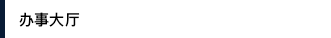
<style>
.page{position:relative;width:331px;height:38px;background:#ffffff}
.page>*{position:absolute;margin:0}
.t1{font:15px "PingFangSC-Medium";letter-spacing:0.02em;color:#000000}
</style>
<div class="page">
<p class="t1" style="left:19px;top:12px;width:61px;height:15px">办事大厅</p>
</div>
